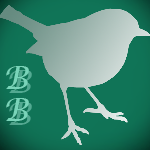
<style>
.page{position:relative;width:150px;height:150px;background:#107457}
.page>*{position:absolute;margin:0}
.t1{font:32px "LucidaCalligraphy-Italic";color:#79d4b9}
</style>
<div class="page">
<p class="t1" style="left:6px;top:66px;width:23px;height:55px">BB</p>
</div>
